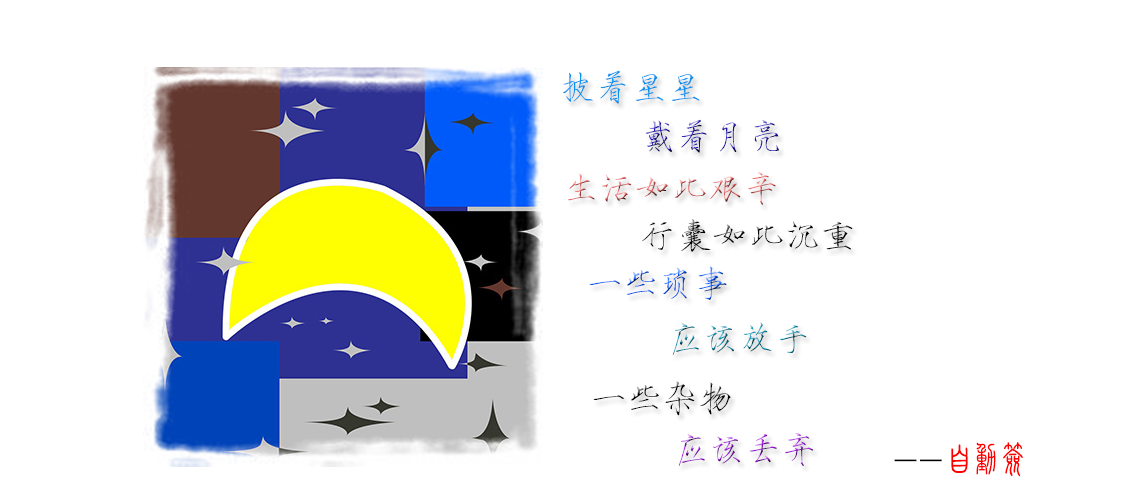
<style>
.page{position:relative;width:1140px;height:500px;background:#ffffff}
.page>*{position:absolute;margin:0}
.t1{font:36px "HYi3gj";color:#0a93f3}
.t2{font:36px "HYi3gj"}
.t3{font:36px "HYj1gf";color:#ff0000}
.t4{font:36px "HYj1gf";color:#000000}
</style>
<div class="page">
<p class="t1" style="left:563px;top:70px;width:137px;height:34px">披着星星</p>
<p class="t2" style="left:645px;top:119px;width:134px;height:34px">戴着月亮</p>
<p class="t2" style="left:568px;top:172px;width:208px;height:33px">生活如此艰辛</p>
<p class="t2" style="left:642px;top:219px;width:211px;height:33px">行囊如此沉重</p>
<p class="t2" style="left:589px;top:266px;width:138px;height:34px">一些琐事</p>
<p class="t2" style="left:672px;top:322px;width:135px;height:33px">应该放手</p>
<p class="t2" style="left:593px;top:381px;width:138px;height:35px">一些杂物</p>
<p class="t2" style="left:678px;top:433px;width:136px;height:33px">应该丢弃</p>
<p class="t3" style="left:951px;top:444px;width:17px;height:29px">自</p>
<p class="t3" style="left:976px;top:442px;width:20px;height:33px">动</p>
<p class="t3" style="left:1003px;top:442px;width:20px;height:35px">签</p>
<p class="t4" style="left:894px;top:459px;width:48px;height:3px">--</p>
</div>
